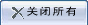
<style>
.page{position:relative;width:88px;height:25px}
.page>*{position:absolute;margin:0}
.t1{font:10px "SimHei";letter-spacing:0.1em;color:#000000;scale:1.2 1}
</style>
<div class="page">
<p class="t1" style="left:27px;top:6px;width:49px;height:10px">关闭所有</p>
</div>
